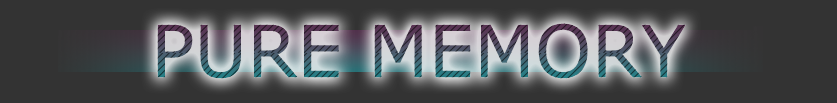
<style>
.page{position:relative;width:837px;height:103px;background:#333333}
.page>*{position:absolute;margin:0}
.t1{font:72px "Verdana"}
</style>
<div class="page">
<p class="t1" style="left:157px;top:23px;width:529px;height:56px">PURE MEMORY</p>
<p class="t1" style="left:157px;top:23px;width:529px;height:56px">PURE MEMORY</p>
</div>
